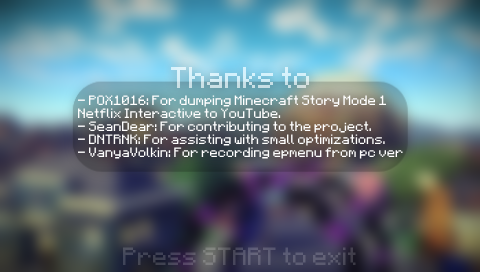
<style>
.page{position:relative;width:480px;height:272px}
.page>*{position:absolute;margin:0}
.t1{font:24px "Minecraft";color:#d3f0f9}
.t2{font:11px "Minecraft";color:#ffffff}
.t3{font:20px "Minecraft"}
</style>
<div class="page">
<p class="t1" style="left:171px;top:67px;width:138px;height:21px">Thanks to</p>
<p class="t2" style="left:77px;top:95px;width:326px;height:64px">- POX1016: For dumping Minecraft Story Mode 1                Netflix Interactive to YouTube.<br>- SeanDear: For contributing to the project.<br>- DNTRNK: For assisting with small optimizations.<br>- VanyaVolkin: For recording epmenu from pc ver</p>
<p class="t3" style="left:123px;top:247px;width:233px;height:18px">Press START to exit</p>
</div>
